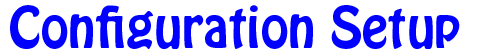
<style>
.page{position:relative;width:500px;height:55px;background:#ffffff}
.page>*{position:absolute;margin:0}
.t1{font:50px "HoboStd";color:#0000ff}
</style>
<div class="page">
<p class="t1" style="left:10px;top:5px;width:450px;height:44px">Configuration Setup</p>
</div>
